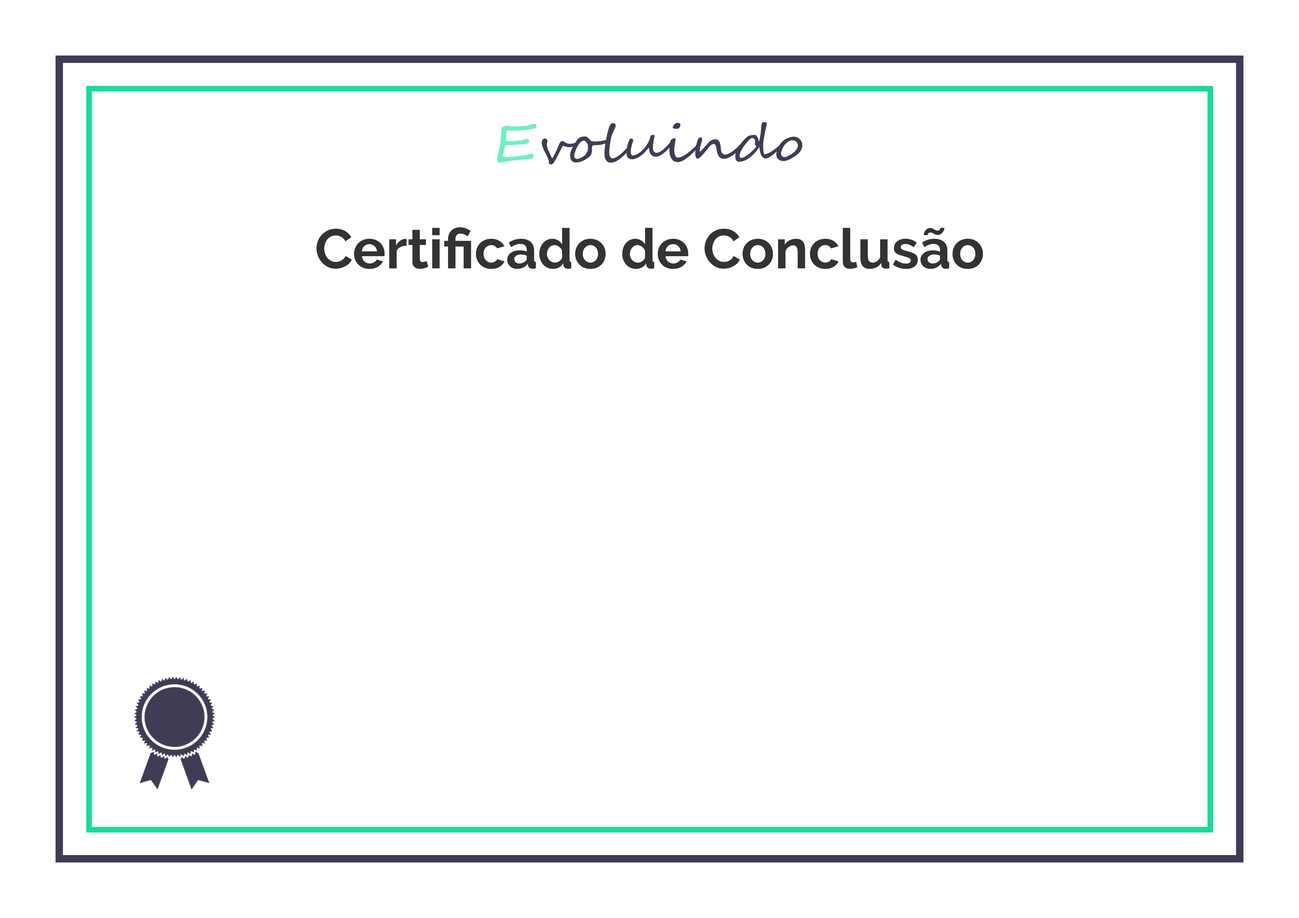
<style>
.page{position:relative;width:1299px;height:918px;background:#ffffff}
.page>*{position:absolute;margin:0}
.t1{font:55.5px "Raleway-Bold";color:#333333}
</style>
<div class="page">
<p class="t1" style="left:316px;top:227px;width:667px;height:42px">Certificado de Conclusão</p>
</div>
